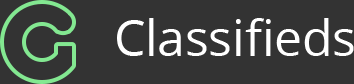
<style>
.page{position:relative;width:354px;height:84px;background:#333333}
.page>*{position:absolute;margin:0}
.t1{font:50px "OpenSans";color:#ffffff}
</style>
<div class="page">
<p class="t1" style="left:117px;top:18px;width:237px;height:38px">Classifieds</p>
</div>
